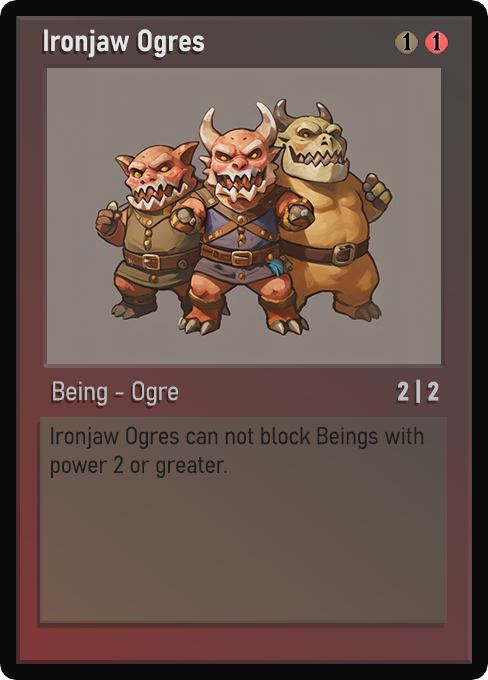
<style>
.page{position:relative;width:488px;height:680px}
.page>*{position:absolute;margin:0}
.t1{font:30px "Bahnschrift-SemiBoldSemiCondensed";color:#f2f2f2;font-weight:bold}
.t2{font:25px "WTRRoycroft";color:#000000;font-weight:bold;scale:1.09 1}
.t3{font:26px "Bahnschrift-LightSemiCondensed";color:#c8c8c8;font-weight:bold}
.t4{font:26px "Bahnschrift-BoldSemiCondensed";color:#c1bdbd;font-weight:bold}
.t5{font:24px "Bahnschrift-LightSemiCondensed";color:#1e1e1e;font-weight:bold}
</style>
<div class="page">
<p class="t1" style="left:44px;top:29px;width:160px;height:29px;opacity:0.9">Ironjaw Ogres</p>
<p class="t2" style="left:403px;top:32px;width:8px;height:19px">1</p>
<p class="t2" style="left:432px;top:32px;width:9px;height:19px">1</p>
<p class="t3" style="left:53px;top:381px;width:125px;height:25px;opacity:0.9">Being - Ogre</p>
<p class="t4" style="left:398px;top:379px;width:41px;height:24px">2 | 2</p>
<p class="t5" style="left:51px;top:426px;width:373px;height:52px">Ironjaw Ogres can not block Beings with power 2 or greater.</p>
</div>
